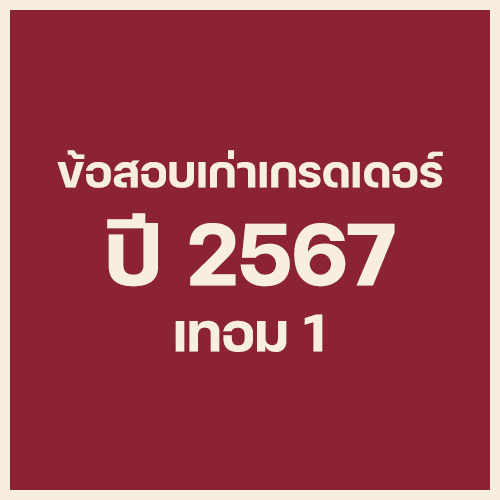
<style>
.page{position:relative;width:500px;height:500px;background:#8b2332}
.page>*{position:absolute;margin:0}
.t1{font:60px "FCMinimalBold";color:#f8eedf}
.t2{font:120px "FCMinimalBold";color:#f8eedf}
.t3{font:72px "FCMinimalBold";color:#f8eedf}
</style>
<div class="page">
<p class="t1" style="left:57px;top:150px;width:386px;height:38px">ข้อสอบเก่าเกรดเดอร์</p>
<p class="t2" style="left:107px;top:213px;width:288px;height:74px">ปี 2567</p>
<p class="t3" style="left:175px;top:314px;width:148px;height:38px">เทอม 1</p>
</div>
